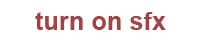
<style>
.page{position:relative;width:200px;height:45px;background:#ffffff}
.page>*{position:absolute;margin:0}
.t1{font:25px "Arial-BoldMT";color:#a24242}
</style>
<div class="page">
<p class="t1" style="left:35px;top:12px;width:131px;height:18px">turn on sfx</p>
</div>
